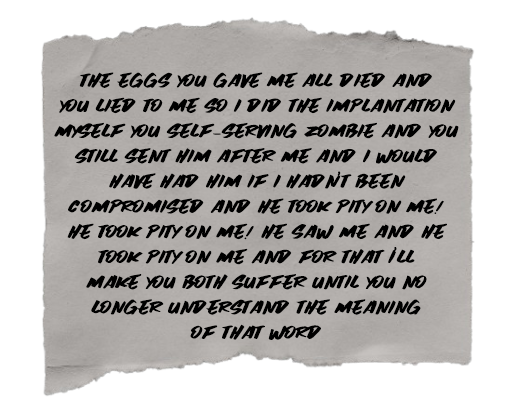
<style>
.page{position:relative;width:531px;height:406px;background:#ffffff}
.page>*{position:absolute;margin:0}
.t1{font:21px "BlackSpirit";color:#000000}
</style>
<div class="page">
<p class="t1" style="left:54px;top:72px;width:405px;height:268px;text-align:center">THE EGGS YOU GAVE ME ALL DIED AND<br>YOU LIED TO ME SO I DID THE IMPLANTATION<br>MYSELF YOU SELF-SERVING ZOMBIE AND YOU<br>STILL SENT HIM AFTER ME AND I WOULD<br>HAVE HAD HIM IF I HADN’T BEEN<br>COMPROMISED AND HE TOOK PITY ON ME!<br>HE TOOK PITY ON ME! HE SAW ME AND HE<br>TOOK PITY ON ME AND FOR THAT I’LL<br>MAKE YOU BOTH SUFFER UNTIL YOU NO<br>LONGER UNDERSTAND THE MEANING<br>OF THAT WORD</p>
</div>
